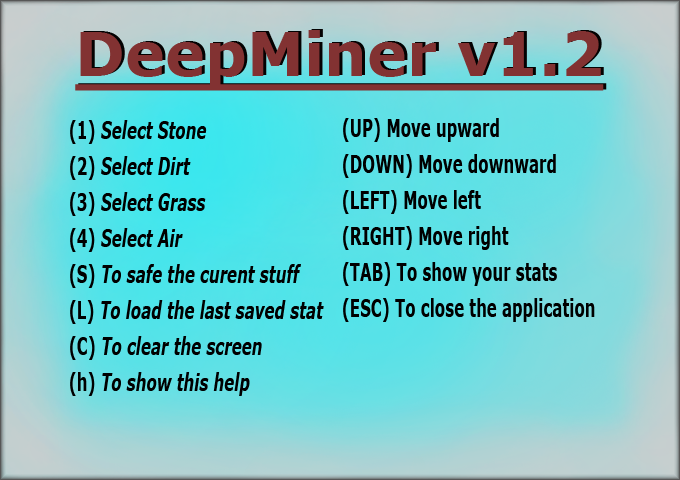
<style>
.page{position:relative;width:680px;height:480px}
.page>*{position:absolute;margin:0}
.t1{font:60px "Verdana-Bold";color:#823232;text-decoration:underline}
.t2{font:24px/18px "Verdana-BoldItalic";color:#000000;scale:0.63 1}
.t3{font:24px/18px "Verdana-Bold";color:#000000;scale:0.63 1}
</style>
<div class="page">
<p class="t1" style="left:75px;top:30px;width:529px;height:61px">DeepMiner v1.2</p>
<p class="t1" style="left:78px;top:29px;width:529px;height:61px">DeepMiner v1.2</p>
<p class="t2" style="left:70px;top:120px;width:254px;height:276px"><span class="t3">(1) </span>Select Stone <br><br><span class="t3">(2) </span>Select Dirt<br><br><span class="t3">(3) </span>Select Grass<br><br><span class="t3">(4) </span>Select Air<br><br><span class="t3">(S) </span>To safe the curent stuff<br><br><span class="t3">(L) </span>To load the last saved stat<br><br><span class="t3">(C) </span>To clear the screen<br><br><span class="t3">(h) </span>To show this help</p>
<p class="t3" style="left:343px;top:118px;width:252px;height:204px">(UP) Move upward<br><br>(DOWN) Move downward<br><br>(LEFT) Move left<br><br>(RIGHT) Move right<br><br>(TAB) To show your stats<br><br>(ESC) To close the application</p>
</div>
